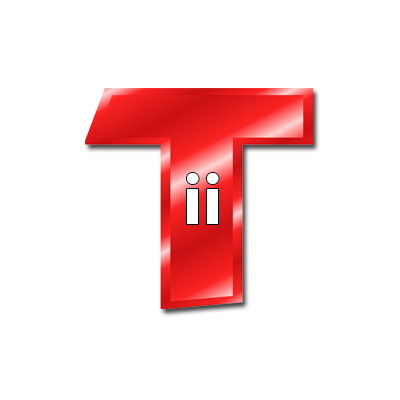
<style>
.page{position:relative;width:400px;height:400px;background:#ffffff}
.page>*{position:absolute;margin:0}
.t1{font:72px "MyriadPro-Bold";color:#fcfdfd}
</style>
<div class="page">
<p class="t1" style="left:187px;top:173px;width:32px;height:51px">ii</p>
</div>
